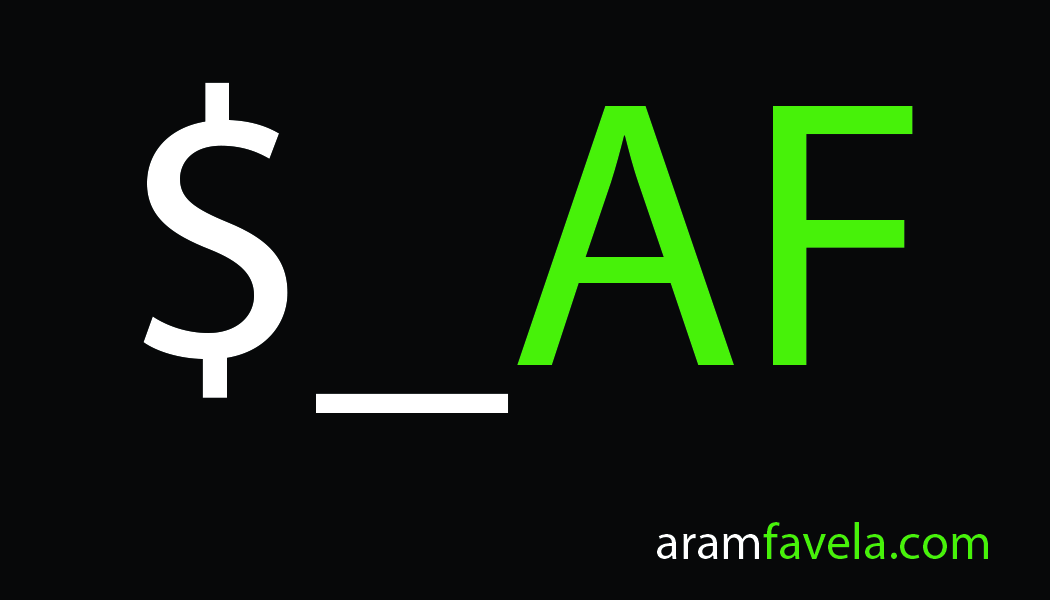
<style>
.page{position:relative;width:1050px;height:600px;background:#070809}
.page>*{position:absolute;margin:0}
.t1{font:384.2px "MyriadPro-Regular";color:#ffffff}
.t2{font:384.2px "MyriadPro-Regular";color:#47f209}
.t3{font:50.8px "MyriadPro-Regular";color:#47f209}
.t4{font:50.8px "MyriadPro-Regular";color:#ffffff}
</style>
<div class="page">
<p class="t1" style="left:143px;top:82px;width:770px;height:331px">$_<span class="t2">AF</span></p>
<p class="t3" style="left:657px;top:522px;width:331px;height:37px"><span class="t4">aram</span>favela.com</p>
</div>
